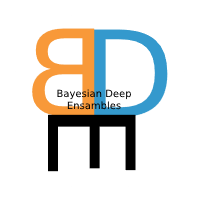
<style>
.page{position:relative;width:200px;height:200px;background:#ffffff}
.page>*{position:absolute;margin:0}
.t1{font:120px "DejaVuSans";color:#f89939}
.t2{font:120px "DejaVuSans";color:#3499cd}
.t3{font:10px "DejaVuSans";color:#000000}
.t4{font:120px "DejaVuSans";color:#000000}
</style>
<div class="page">
<p class="t1" style="left:32px;top:28px;width:63px;height:88px;rotate:180deg">B</p>
<p class="t2" style="left:93px;top:29px;width:75px;height:88px">D</p>
<p class="t3" style="left:57px;top:89px;width:74px;height:21px;text-align:center">Bayesian Deep<br>Ensambles</p>
<p class="t4" style="left:47px;top:114px;width:89px;height:58px;rotate:90deg">E</p>
</div>
